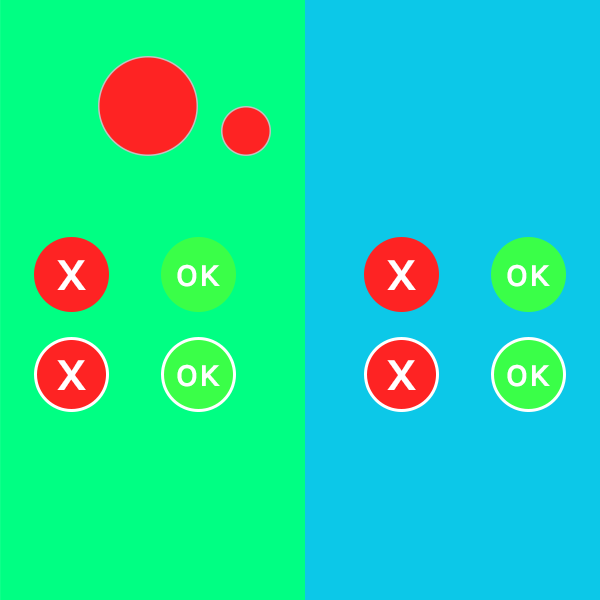
<style>
.page{position:relative;width:600px;height:600px;background:#00ff83}
.page>*{position:absolute;margin:0}
.t1{font:46px "Karla-Bold";letter-spacing:0.23em;color:#ffffff}
.t2{font:32px "Karla-Bold";letter-spacing:0.025em;color:#ffffff}
</style>
<div class="page">
<p class="t1" style="left:57px;top:260px;width:29px;height:30px">X</p>
<p class="t2" style="left:177px;top:264px;width:43px;height:23px">OK</p>
<p class="t1" style="left:387px;top:260px;width:29px;height:30px">X</p>
<p class="t2" style="left:507px;top:264px;width:43px;height:23px">OK</p>
<p class="t1" style="left:57px;top:360px;width:29px;height:30px">X</p>
<p class="t2" style="left:177px;top:364px;width:43px;height:23px">OK</p>
<p class="t1" style="left:387px;top:360px;width:29px;height:30px">X</p>
<p class="t2" style="left:507px;top:364px;width:43px;height:23px">OK</p>
</div>
